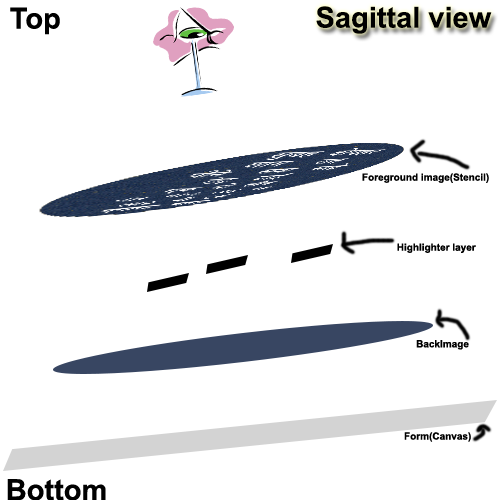
<style>
.page{position:relative;width:500px;height:500px;background:#ffffff}
.page>*{position:absolute;margin:0}
.t1{font:29px "Arial-BoldMT";color:#000000}
.t2{font:10px "Arial-BoldMT";color:#000000}
</style>
<div class="page">
<p class="t1" style="left:316px;top:6px;width:176px;height:28px">Sagittal view</p>
<p class="t1" style="left:10px;top:7px;width:50px;height:28px">Top</p>
<p class="t2" style="left:362px;top:173px;width:127px;height:10px">Foreground image(Stencil)</p>
<p class="t2" style="left:397px;top:243px;width:79px;height:10px">Highlighter layer</p>
<p class="t2" style="left:416px;top:340px;width:53px;height:10px">BackImage</p>
<p class="t2" style="left:404px;top:432px;width:67px;height:10px">Form(Canvas)</p>
<p class="t1" style="left:7px;top:479px;width:99px;height:22px">Bottom</p>
</div>
